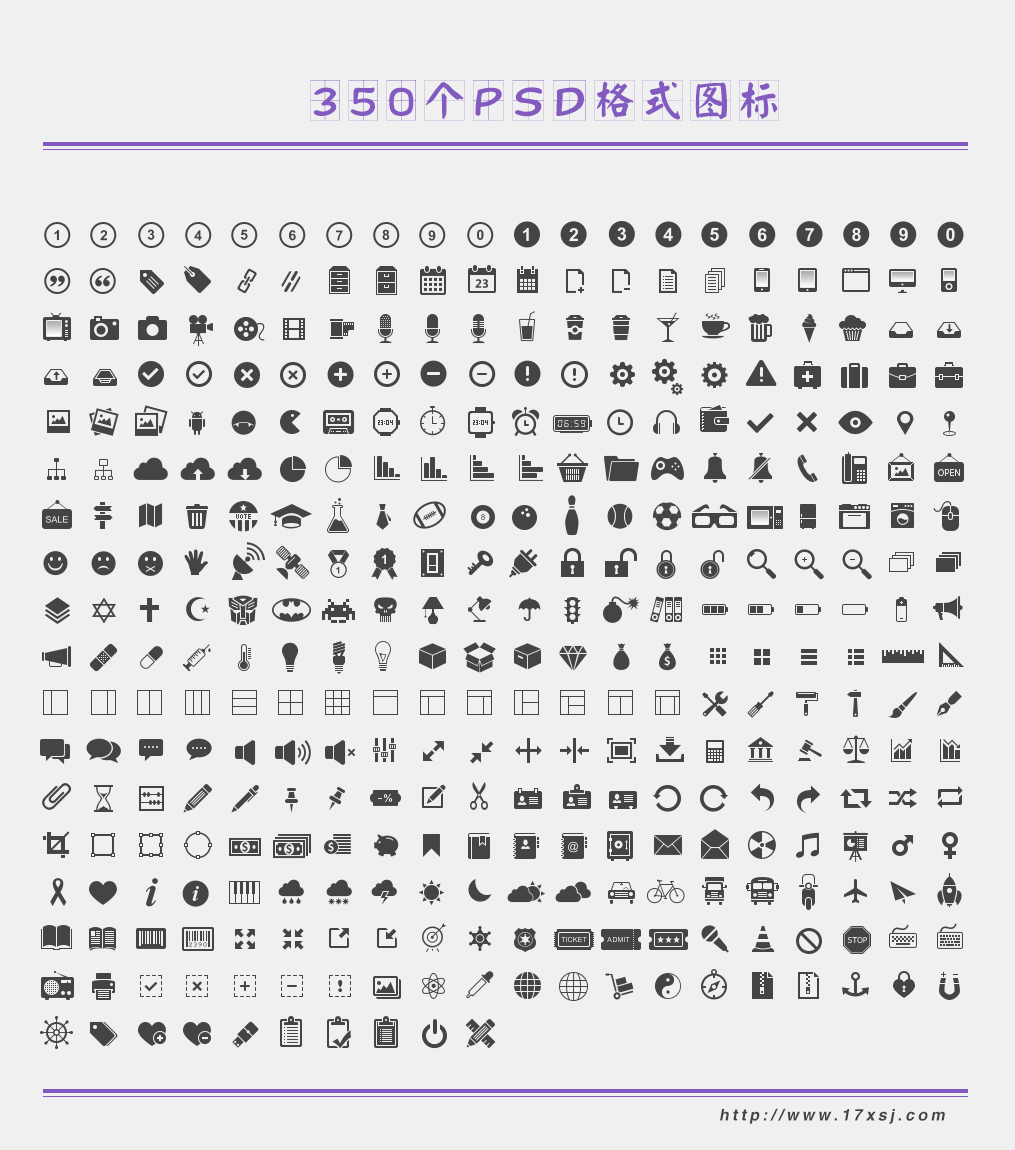
<style>
.page{position:relative;width:1015px;height:1150px;background:#f0f0f0}
.page>*{position:absolute;margin:0}
.t1{font:40.9px "YankaigungEG-Ultra-GB";letter-spacing:0.2em;color:#835ac0}
.t2{font:16px "CTCuHeiSJ";letter-spacing:0.2em;color:#444444;font-style:italic}
</style>
<div class="page">
<p class="t1" style="left:310px;top:80px;width:469px;height:41px">350个PSD格式图标</p>
<p class="t2" style="left:720px;top:1108px;width:225px;height:16px">http://www.17xsj.com</p>
</div>
